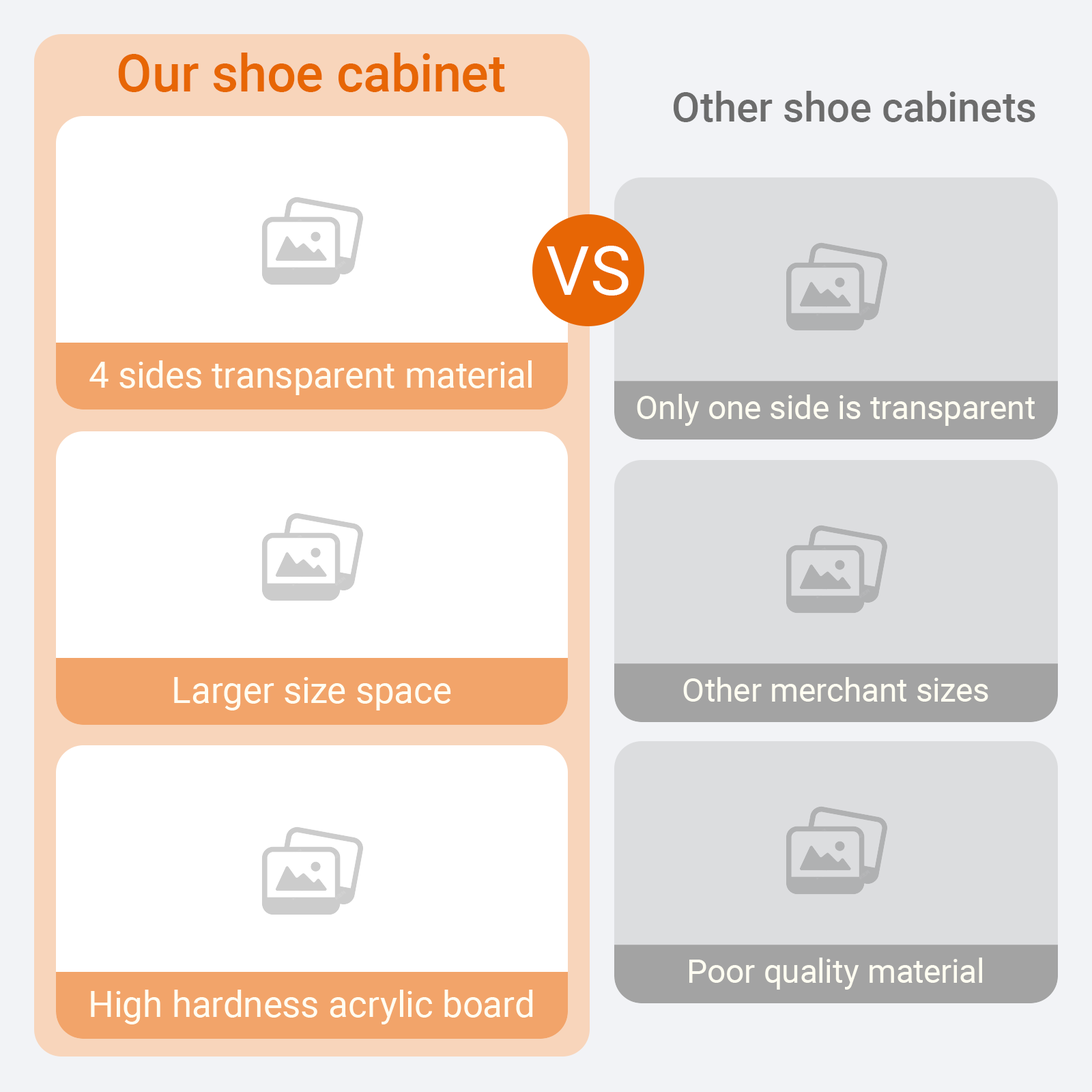
<style>
.page{position:relative;width:1092px;height:1092px;background:#ffffff}
.page>*{position:absolute;margin:0}
.t1{font:51.9px "Roboto-Medium";color:#e76605}
.t2{font:40.9px "Roboto-Medium";color:#6c6c6c}
.t3{font:68.2px "Roboto-Regular";color:#ffffff;text-transform:uppercase}
.t4{font:36.4px "Roboto-Regular";color:#fffdf1}
.t5{font:32.8px "Roboto-Regular";color:#fffdf1}
</style>
<div class="page">
<p class="t1" style="left:118px;top:53px;width:387px;height:39px">Our shoe cabinet</p>
<p class="t2" style="left:674px;top:91px;width:361px;height:31px">Other shoe cabinets</p>
<p class="t3" style="left:547px;top:246px;width:82px;height:50px">vs</p>
<p class="t4" style="left:89px;top:360px;width:443px;height:35px">4 sides transparent material</p>
<p class="t5" style="left:637px;top:394px;width:398px;height:32px">Only one side is transparent</p>
<p class="t4" style="left:174px;top:677px;width:277px;height:33px">Larger size space</p>
<p class="t5" style="left:683px;top:677px;width:305px;height:25px">Other merchant sizes</p>
<p class="t5" style="left:689px;top:958px;width:293px;height:32px">Poor quality material</p>
<p class="t4" style="left:91px;top:990px;width:442px;height:34px">High hardness acrylic board</p>
</div>
